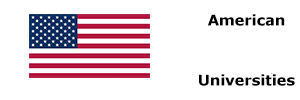
<style>
.page{position:relative;width:300px;height:100px;background:#ffffff}
.page>*{position:absolute;margin:0}
.t1{font:14.8px/60px "Verdana-Bold";letter-spacing:-0.02em;color:#000000}
</style>
<div class="page">
<p class="t1" style="left:199px;top:14px;width:96px;height:72px;text-align:center">American<br>Universities</p>
</div>
